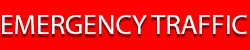
<style>
.page{position:relative;width:250px;height:50px;background:#ff0000}
.page>*{position:absolute;margin:0}
.t1{font:27.9px "MyriadPro-Regular";color:#ffffff}
</style>
<div class="page">
<p class="t1" style="left:2px;top:15px;width:245px;height:19px">EMERGENCY TRAFFIC</p>
</div>
